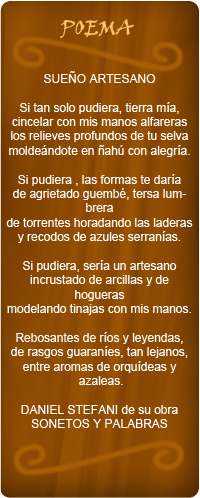
<style>
.page{position:relative;width:200px;height:498px}
.page>*{position:absolute;margin:0}
.t1{font:20px "VinerHandITC";color:#ffc36d}
.t2{font:12px "ArialMT";color:#ffffff}
</style>
<div class="page">
<p class="t1" style="left:60px;top:19px;width:74px;height:20px">POEMA</p>
<p class="t2" style="left:6px;top:71px;width:187px;height:357px;text-align:center">SUEÑO ARTESANO<br><br>Si tan solo pudiera, tierra mía,<br>cincelar con mis manos alfareras<br>los relieves profundos de tu selva<br>moldeándote en ñahú con alegría.<br><br>Si pudiera , las formas te daría<br>de agrietado guembé, tersa lumbrera<br>de torrentes horadando las laderas<br>y recodos de azules serranías.<br><br>Si pudiera, sería un artesano<br>incrustado de arcillas y de hogueras<br>modelando tinajas con mis manos.<br><br>Rebosantes de ríos y leyendas,<br>de rasgos guaraníes, tan lejanos,<br>entre aromas de orquídeas y<br> azaleas.<br><br>DANIEL STEFANI de su obra SONETOS Y PALABRAS</p>
</div>
